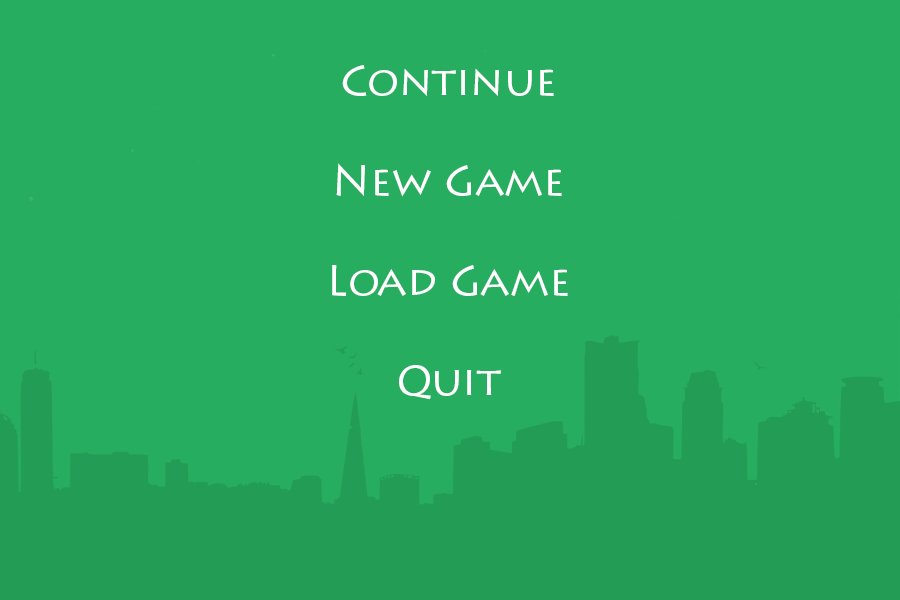
<style>
.page{position:relative;width:900px;height:600px;background:#27ad60}
.page>*{position:absolute;margin:0}
.t1{font:41.7px "LithosPro-Regular";color:#ffffff}
</style>
<div class="page">
<p class="t1" style="left:332px;top:65px;width:236px;height:335px;text-align:center">Continue<br><br>New Game<br><br>Load Game<br><br>Quit</p>
</div>
